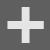
<style>
.page{position:relative;width:50px;height:50px;background:#5f5f5f}
.page>*{position:absolute;margin:0}
.t1{font:72px "HelveticaNeue-Bold";color:#e5e5e5}
</style>
<div class="page">
<p class="t1" style="left:7px;top:7px;width:37px;height:36px">+</p>
</div>
